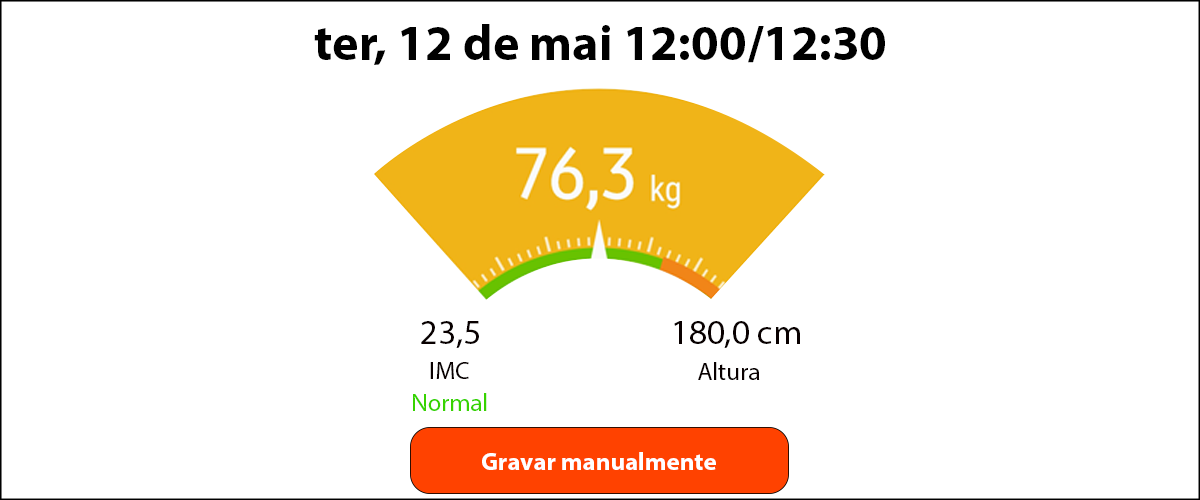
<style>
.page{position:relative;width:1200px;height:500px;background:#ffffff}
.page>*{position:absolute;margin:0}
.t1{font:50px "MyriadPro-Bold";color:#000000}
.t2{font:35px "MyriadPro-Regular";color:#090000}
.t3{font:25px "MyriadPro-Regular";color:#090000}
.t4{font:25px "MyriadPro-Regular";color:#37d300}
.t5{font:25px "MyriadPro-Bold";color:#ffffff}
</style>
<div class="page">
<p class="t1" style="left:314px;top:24px;width:571px;height:41px">ter, 12 de mai 12:00/12:30</p>
<p class="t2" style="left:421px;top:321px;width:58px;height:27px">23,5</p>
<p class="t2" style="left:674px;top:321px;width:126px;height:27px">180,0 cm</p>
<p class="t3" style="left:430px;top:362px;width:39px;height:17px">IMC</p>
<p class="t3" style="left:698px;top:362px;width:62px;height:18px">Altura</p>
<p class="t4" style="left:413px;top:393px;width:74px;height:18px">Normal</p>
<p class="t5" style="left:482px;top:452px;width:234px;height:18px">Gravar manualmente</p>
</div>
